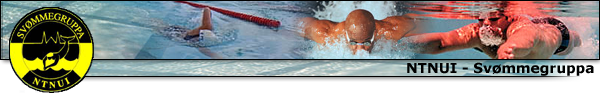
<style>
.page{position:relative;width:600px;height:100px}
.page>*{position:absolute;margin:0}
.t1{font:13.8px "Verdana-Bold";color:#000000}
</style>
<div class="page">
<p class="t1" style="left:407px;top:62px;width:187px;height:14px">NTNUI - Svømmegruppa</p>
</div>
